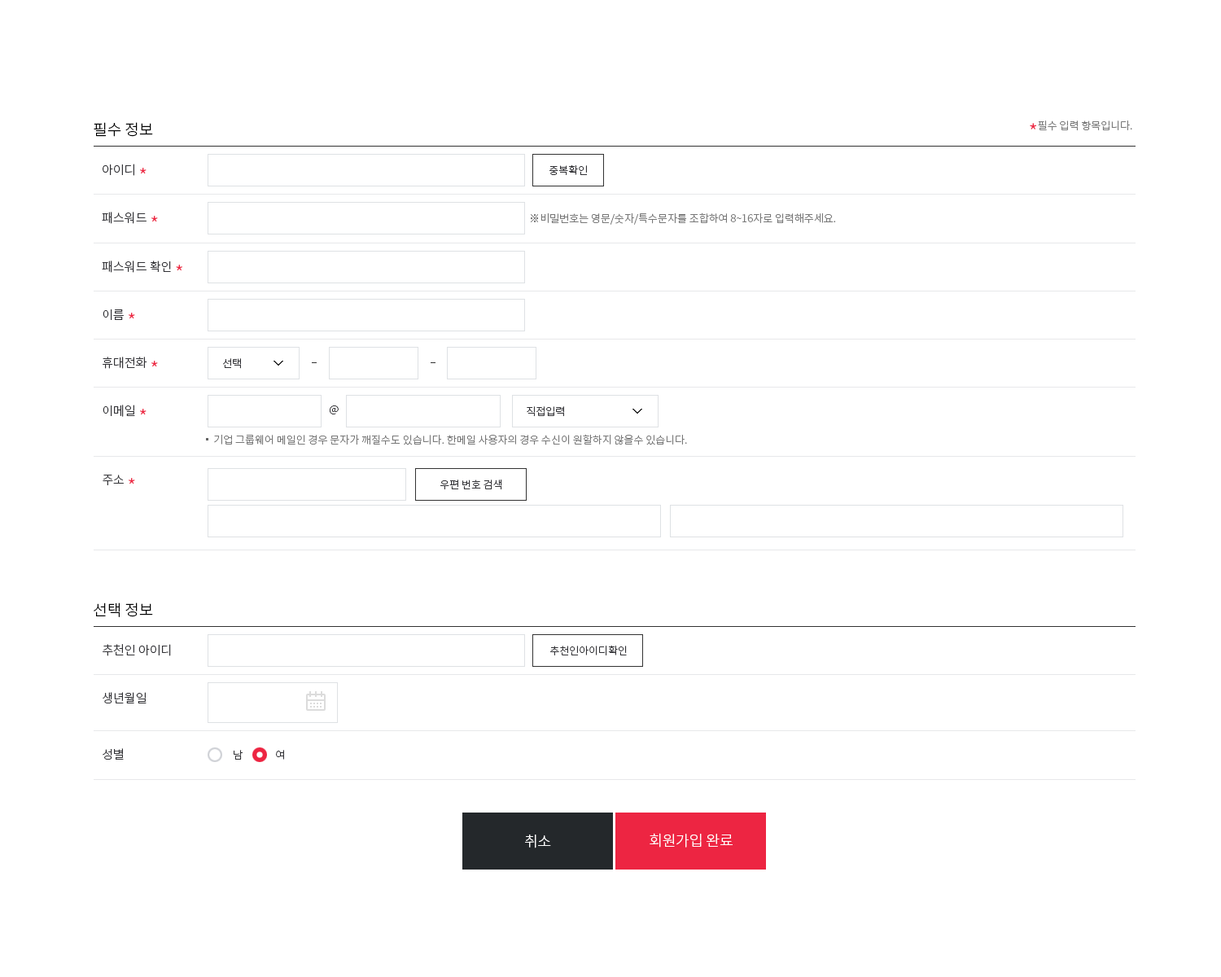
<style>
.page{position:relative;width:1221px;height:977px;background:#ffffff}
.page>*{position:absolute;margin:0}
.t1{font:15.5px "NotoSansKR-Light";color:#000000}
.t2{font:10.6px "NotoSansKR-Light";color:#787878}
.t3{font:21.2px "NotoSansKR-Light";color:#ed2542}
.t4{font:12.2px "NotoSansKR-Light";color:#323236}
.t5{font:20.3px "NotoSansKR-Light";color:#ed2542}
.t6{font:10.6px "NotoSansKR-Light";color:#323236}
.t7{font:14.7px "NotoSansKR-Light";color:#ffffff}
</style>
<div class="page">
<p class="t1" style="left:94px;top:122px;width:59px;height:15px">필수 정보</p>
<p class="t2" style="left:1030px;top:120px;width:102px;height:11px"><span class="t3">*</span>필수 입력 항목입니다.</p>
<p class="t4" style="left:103px;top:164px;width:44px;height:12px">아이디 <span class="t5">*</span></p>
<p class="t6" style="left:549px;top:164px;width:39px;height:11px">중복확인</p>
<p class="t4" style="left:102px;top:212px;width:56px;height:12px">패스워드 <span class="t5">*</span></p>
<p class="t2" style="left:530px;top:212px;width:306px;height:13px">※비밀번호는 영문/숫자/특수문자를 조합하여 8~16자로 입력해주세요.</p>
<p class="t4" style="left:102px;top:260px;width:80px;height:13px">패스워드 확인 <span class="t5">*</span></p>
<p class="t4" style="left:103px;top:309px;width:32px;height:11px">이름 <span class="t5">*</span></p>
<p class="t4" style="left:103px;top:356px;width:55px;height:13px">휴대전화 <span class="t5">*</span></p>
<p class="t6" style="left:223px;top:358px;width:18px;height:11px">선택</p>
<p class="t4" style="left:103px;top:405px;width:44px;height:12px">이메일 <span class="t5">*</span></p>
<p class="t6" style="left:329px;top:405px;width:10px;height:9px">@</p>
<p class="t6" style="left:527px;top:406px;width:37px;height:11px">직접입력</p>
<p class="t2" style="left:214px;top:434px;width:473px;height:11px">기업 그룹웨어 메일인 경우 문자가 깨질수도 있습니다. 한메일 사용자의 경우 수신이 원할하지 않을수 있습니다.</p>
<p class="t4" style="left:103px;top:475px;width:32px;height:10px">주소 <span class="t5">*</span></p>
<p class="t6" style="left:440px;top:479px;width:62px;height:11px">우편 번호 검색</p>
<p class="t1" style="left:94px;top:602px;width:59px;height:15px">선택 정보</p>
<p class="t4" style="left:103px;top:644px;width:68px;height:12px">추천인 아이디</p>
<p class="t6" style="left:550px;top:645px;width:77px;height:10px">추천인아이디확인</p>
<p class="t4" style="left:103px;top:692px;width:44px;height:11px">생년월일</p>
<p class="t4" style="left:103px;top:748px;width:21px;height:11px">성별</p>
<p class="t6" style="left:234px;top:750px;width:50px;height:9px">남              여</p>
<p class="t7" style="left:650px;top:833px;width:83px;height:14px">회원가입 완료</p>
<p class="t7" style="left:525px;top:834px;width:26px;height:14px">취소</p>
</div>
